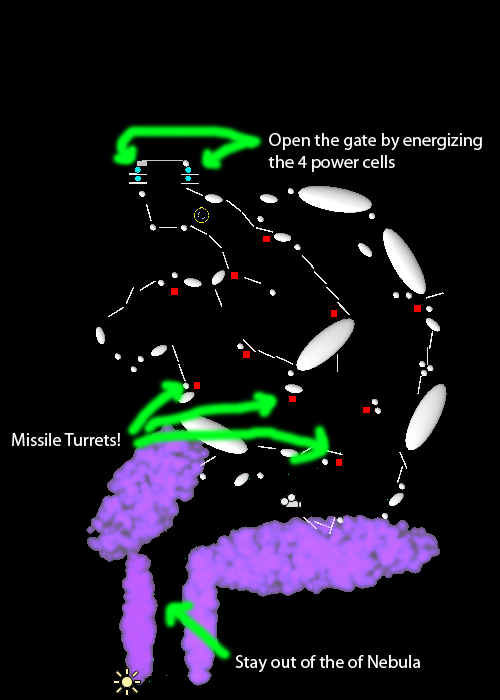
<style>
.page{position:relative;width:500px;height:700px;background:#000000}
.page>*{position:absolute;margin:0}
.t1{font:18px "MyriadPro-Regular";color:#fefefe}
.t2{font:18px "MyriadPro-Regular";color:#ffffff}
</style>
<div class="page">
<p class="t1" style="left:268px;top:133px;width:214px;height:39px">Open the gate by energizing<br>the 4 power cells</p>
<p class="t2" style="left:12px;top:433px;width:108px;height:13px">Missile Turrets!</p>
<p class="t2" style="left:235px;top:655px;width:185px;height:18px">Stay out of the of Nebula</p>
</div>
